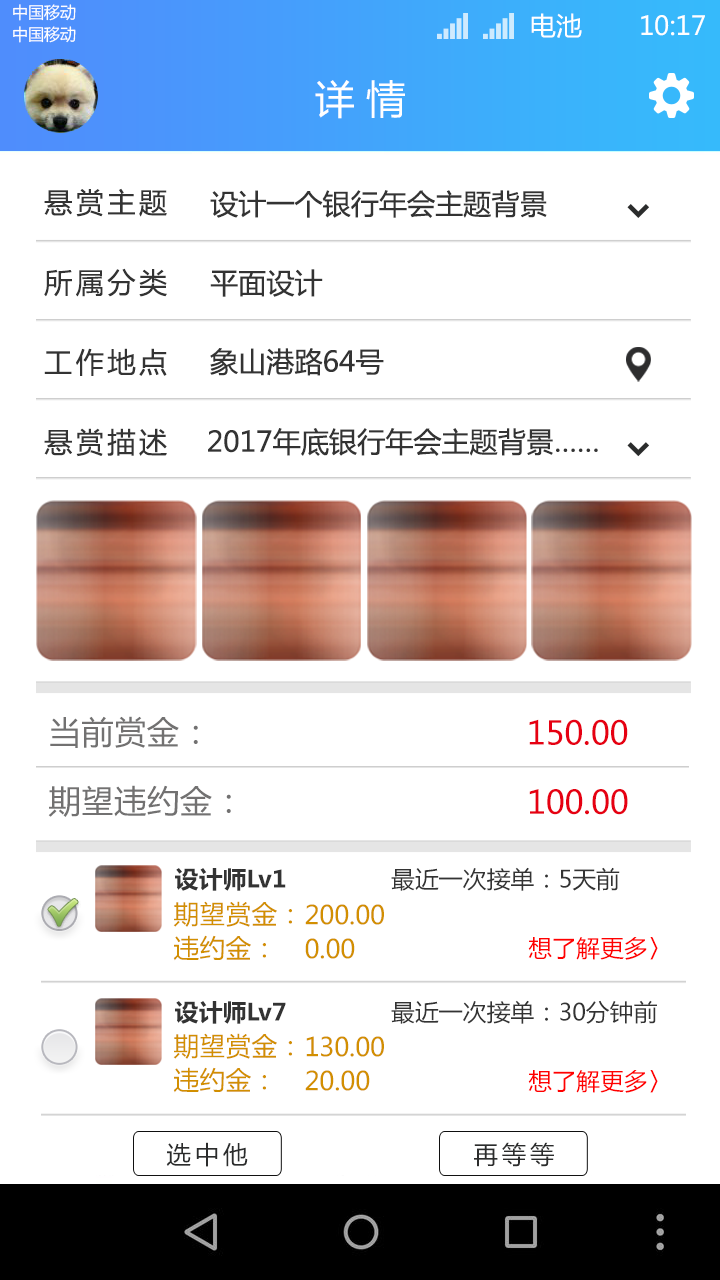
<style>
.page{position:relative;width:720px;height:1280px;background:#ffffff}
.page>*{position:absolute;margin:0}
.t1{font:16.2px "MicrosoftYaHei";color:#ffffff;text-transform:uppercase}
.t2{font:26.1px "MicrosoftYaHei";color:#ffffff;text-transform:uppercase}
.t3{font:39.5px "MicrosoftYaHei";color:#ffffff;text-transform:uppercase}
.t4{font:28.1px/79.9px "MicrosoftYaHei";color:#333333}
.t5{font:28.1px "MicrosoftYaHei";color:#333333}
.t6{font:31.9px "MicrosoftYaHei";color:#727171}
.t7{font:31.9px "MicrosoftYaHei";color:#e60012}
.t8{font:23.6px "MicrosoftYaHei-Bold";color:#333333}
.t9{font:23.6px "MicrosoftYaHei";color:#333333}
.t10{font:25.8px "MicrosoftYaHei";color:#d28f00}
.t11{font:23.6px "MicrosoftYaHei";color:#ff0000}
.t12{font:24.5px "MicrosoftYaHei";letter-spacing:0.15em;color:#2b2c2c}
</style>
<div class="page">
<p class="t1" style="left:13px;top:4px;width:63px;height:17px">中国移动</p>
<p class="t2" style="left:531px;top:13px;width:51px;height:25px">电池</p>
<p class="t2" style="left:641px;top:15px;width:64px;height:21px">10:17</p>
<p class="t1" style="left:13px;top:26px;width:63px;height:17px">中国移动</p>
<p class="t3" style="left:315px;top:80px;width:90px;height:39px">详 情</p>
<p class="t4" style="left:44px;top:188px;width:123px;height:269px;text-align:justify">悬赏主题<br>所属分类<br>工作地点<br>悬赏描述</p>
<p class="t5" style="left:210px;top:190px;width:337px;height:28px">设计一个银行年会主题背景</p>
<p class="t5" style="left:210px;top:269px;width:113px;height:28px">平面设计</p>
<p class="t5" style="left:210px;top:348px;width:174px;height:28px">象山港路64号</p>
<p class="t5" style="left:208px;top:428px;width:390px;height:28px">2017年底银行年会主题背景……</p>
<p class="t6" style="left:50px;top:716px;width:148px;height:32px">当前赏金：</p>
<p class="t7" style="left:529px;top:719px;width:99px;height:26px">150.00</p>
<p class="t6" style="left:48px;top:785px;width:183px;height:32px">期望违约金：</p>
<p class="t7" style="left:529px;top:789px;width:99px;height:26px">100.00</p>
<p class="t8" style="left:175px;top:868px;width:111px;height:23px">设计师Lv1</p>
<p class="t9" style="left:391px;top:867px;width:229px;height:24px">最近一次接单：5天前</p>
<p class="t10" style="left:173px;top:901px;width:119px;height:26px">期望赏金：</p>
<p class="t10" style="left:305px;top:904px;width:79px;height:21px">200.00</p>
<p class="t10" style="left:173px;top:935px;width:93px;height:26px">违约金：</p>
<p class="t10" style="left:305px;top:938px;width:50px;height:21px">0.00</p>
<p class="t11" style="left:528px;top:937px;width:130px;height:23px">想了解更多〉</p>
<p class="t8" style="left:175px;top:1001px;width:111px;height:23px">设计师Lv7</p>
<p class="t9" style="left:391px;top:1000px;width:266px;height:24px">最近一次接单：30分钟前</p>
<p class="t10" style="left:173px;top:1033px;width:119px;height:26px">期望赏金：</p>
<p class="t10" style="left:306px;top:1036px;width:78px;height:21px">130.00</p>
<p class="t10" style="left:173px;top:1067px;width:93px;height:26px">违约金：</p>
<p class="t10" style="left:305px;top:1070px;width:65px;height:21px">20.00</p>
<p class="t11" style="left:528px;top:1070px;width:130px;height:23px">想了解更多〉</p>
<p class="t12" style="left:166px;top:1142px;width:82px;height:25px">选中他</p>
<p class="t12" style="left:474px;top:1142px;width:80px;height:25px">再等等</p>
</div>
